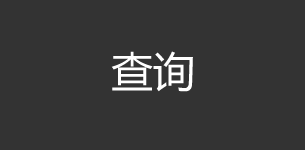
<style>
.page{position:relative;width:305px;height:150px;background:#333333}
.page>*{position:absolute;margin:0}
.t1{font:41.7px "MicrosoftYaHei";color:#ffffff}
</style>
<div class="page">
<p class="t1" style="left:111px;top:51px;width:82px;height:41px">查询</p>
</div>
